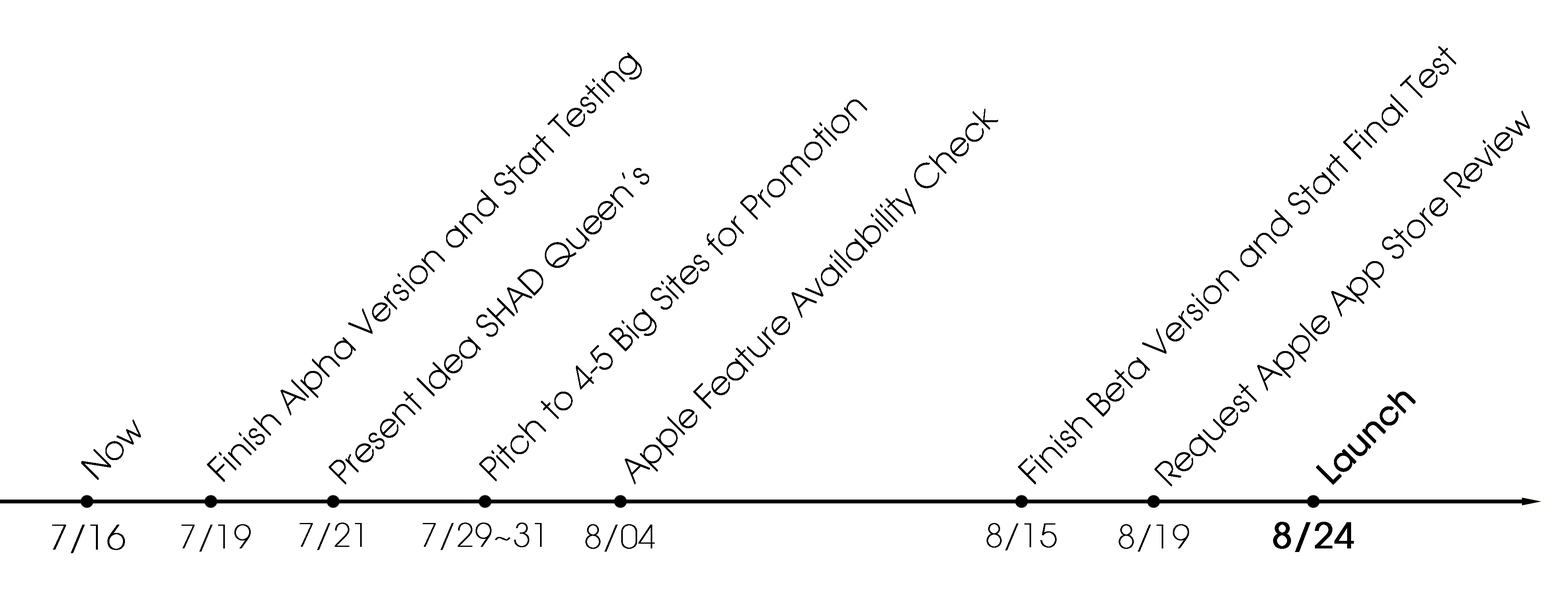
<style>
.page{position:relative;width:1568px;height:597px;background:#ffffff}
.page>*{position:absolute;margin:0}
.t1{font:31.8px "ITCAvantGardeStd-XLt";color:#000000;font-weight:bold}
.t2{font:31.7px "ITCAvantGardeStd-XLt";color:#000000;font-weight:bold}
.t3{font:31.8px "ITCAvantGardeStd-Bk";color:#000000;font-weight:bold}
.t4{font:35.1px "ITCAvantGardeStd-Bk";color:#000000;font-weight:bold}
.t5{font:33.5px "ITCAvantGardeStd-XLt";color:#000000;font-weight:bold}
</style>
<div class="page">
<p class="t1" style="left:207px;top:53px;width:435px;height:429px;rotate:-45deg">Finish Alpha Version and Start Testing</p>
<p class="t1" style="left:1018px;top:46px;width:438px;height:438px;rotate:-45deg">Finish Beta Version and Start Final Test</p>
<p class="t2" style="left:479px;top:99px;width:388px;height:382px;rotate:-45deg">Pitch to 4-5 Big Sites for Promotion</p>
<p class="t1" style="left:625px;top:109px;width:373px;height:375px;rotate:-45deg">Apple Feature Availability Check</p>
<p class="t1" style="left:1155px;top:111px;width:375px;height:375px;rotate:-45deg">Request Apple App Store Review</p>
<p class="t1" style="left:329px;top:168px;width:320px;height:316px;rotate:-45deg">Present Idea SHAD Queen’s</p>
<p class="t3" style="left:1316px;top:392px;width:100px;height:93px;rotate:-45deg">Launch</p>
<p class="t1" style="left:81px;top:419px;width:60px;height:61px;rotate:-45deg">Now</p>
<p class="t4" style="left:1273px;top:522px;width:81px;height:30px">8/24</p>
<p class="t5" style="left:52px;top:525px;width:73px;height:28px">7/16</p>
<p class="t1" style="left:181px;top:524px;width:70px;height:28px">7/19</p>
<p class="t2" style="left:300px;top:523px;width:62px;height:27px">7/21</p>
<p class="t2" style="left:423px;top:523px;width:119px;height:27px">7/29~31</p>
<p class="t1" style="left:585px;top:524px;width:70px;height:28px">8/04</p>
<p class="t2" style="left:987px;top:523px;width:70px;height:27px">8/15</p>
<p class="t1" style="left:1119px;top:524px;width:70px;height:28px">8/19</p>
</div>
